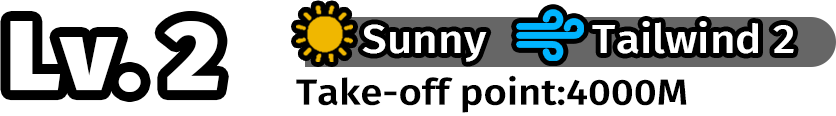
<style>
.page{position:relative;width:836px;height:116px;background:#ffffff}
.page>*{position:absolute;margin:0}
.t1{font:99px "FiraSans-Black";color:#ffffff;scale:1.07 1}
.t2{font:39.6px "FiraSans-Medium";color:#ffffff;scale:1.11 1}
.t3{font:36px "FiraSans-Medium";color:#000000;scale:1.11 1}
</style>
<div class="page">
<p class="t1" style="left:10px;top:21px;width:209px;height:71px">Lv. 2</p>
<p class="t2" style="left:362px;top:24px;width:125px;height:38px">Sunny</p>
<p class="t2" style="left:592px;top:21px;width:202px;height:33px">Tailwind 2</p>
<p class="t3" style="left:296px;top:75px;width:391px;height:38px">Take-off point:4000M</p>
</div>
